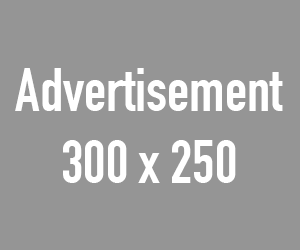
<style>
.page{position:relative;width:300px;height:250px;background:#959595}
.page>*{position:absolute;margin:0}
.t1{font:60px "DINCondensed-Bold";color:#ffffff}
</style>
<div class="page">
<p class="t1" style="left:15px;top:68px;width:268px;height:115px;text-align:center">Advertisement<br>300 x 250</p>
</div>
